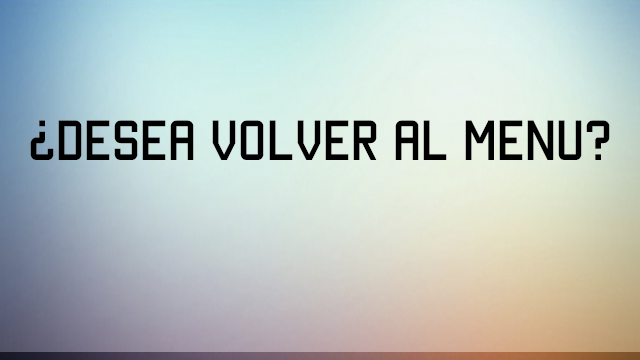
<style>
.page{position:relative;width:640px;height:360px}
.page>*{position:absolute;margin:0}
.t1{font:45px "Manteka";color:#000000}
</style>
<div class="page">
<p class="t1" style="left:30px;top:120px;width:580px;height:40px">¿DESEA VOLVER AL MENU?</p>
</div>
